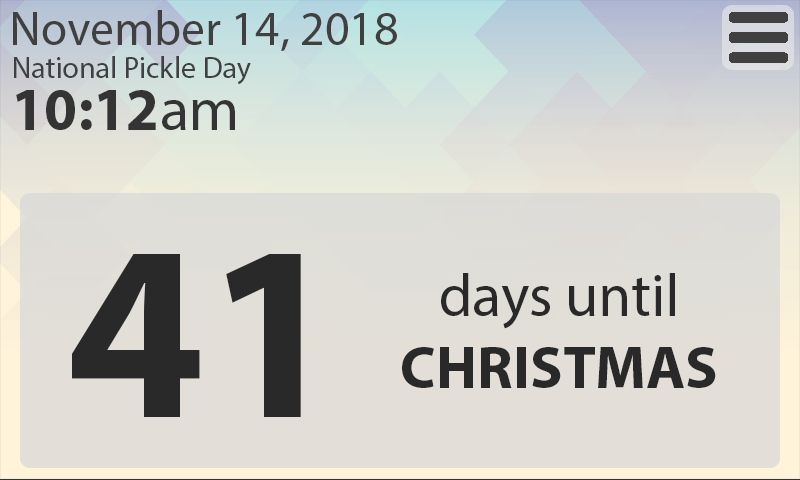
<style>
.page{position:relative;width:800px;height:480px;background:#e3dfd8}
.page>*{position:absolute;margin:0}
.t1{font:48px "MyriadPro-Regular";color:#404040}
.t2{font:30px "MyriadPro-Regular";color:#404040}
.t3{font:60px "MyriadPro-Bold";color:#343434}
.t4{font:60px "MyriadPro-Regular";color:#343434}
.t5{font:250px "MyriadPro-Bold";color:#292929}
.t6{font:60px/55px "MyriadPro-Regular";color:#292929}
.t7{font:60px/72px "MyriadPro-Bold";color:#292929}
</style>
<div class="page">
<p class="t1" style="left:13px;top:10px;width:384px;height:41px">November 14, 2018</p>
<p class="t2" style="left:14px;top:56px;width:237px;height:29px">National Pickle Day</p>
<p class="t3" style="left:16px;top:90px;width:219px;height:40px">10:12<span class="t4">am</span></p>
<p class="t5" style="left:72px;top:254px;width:229px;height:163px">41</p>
<p class="t6" style="left:402px;top:273px;width:314px;height:115px;text-align:center">days until<br><span class="t7">CHRISTMAS</span></p>
</div>
